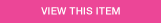
<style>
.page{position:relative;width:161px;height:23px;background:#ec4697}
.page>*{position:absolute;margin:0}
.t1{font:10px "HelveticaNeue-Medium";letter-spacing:0.025em;color:#ffffff}
</style>
<div class="page">
<p class="t1" style="left:41px;top:7px;width:79px;height:8px">VIEW THIS ITEM</p>
</div>
